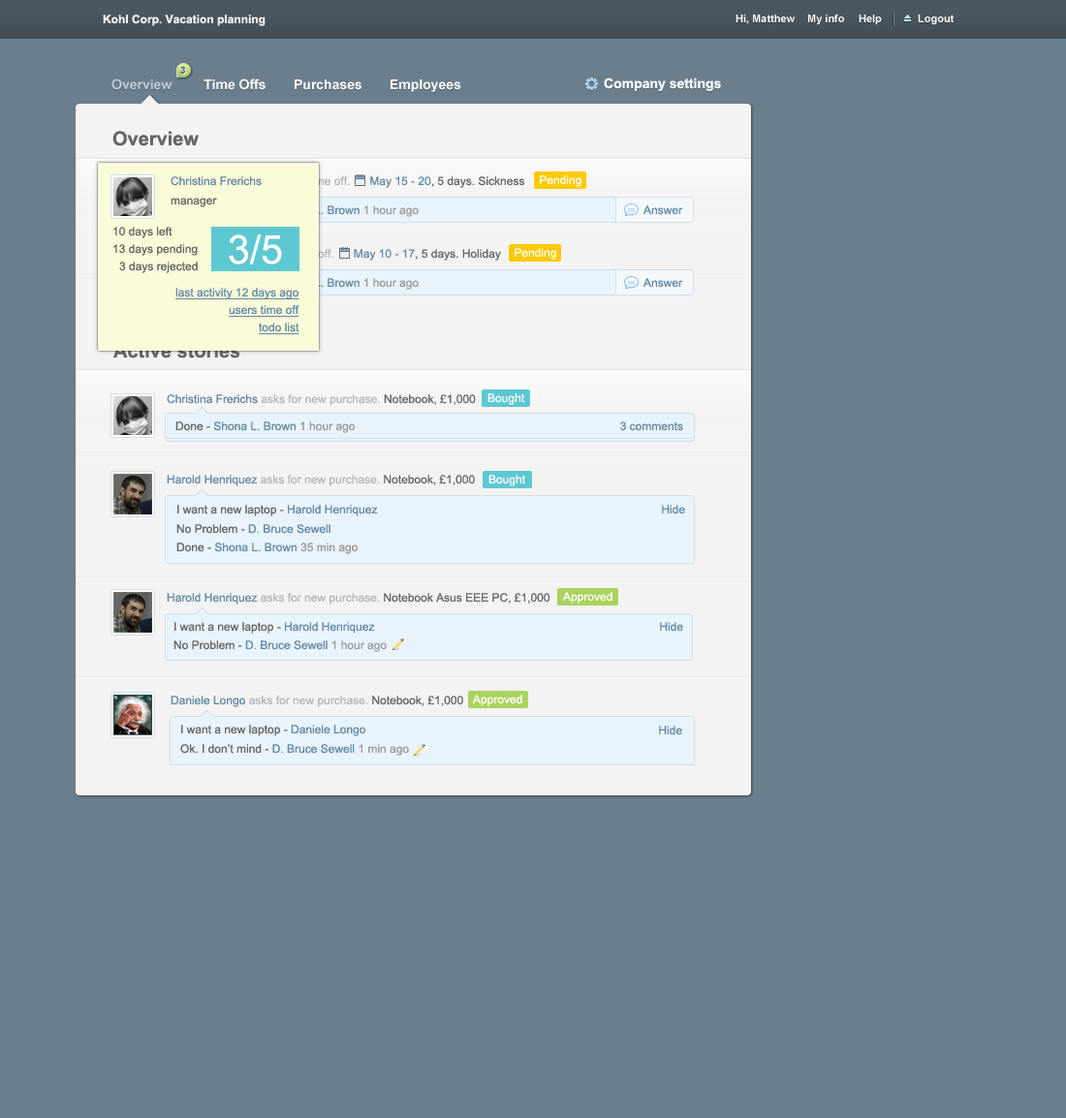
<style>
.page{position:relative;width:1066px;height:1118px;background:#6b7e8d}
.page>*{position:absolute;margin:0}
.t1{font:11.6px "Arial-BoldMT";color:#f3f3f3}
.t2{font:10.7px "Arial-BoldMT";color:#ffffff}
.t3{font:9.7px "Arial-BoldMT";color:#475a6a}
.t4{font:13.6px "Arial-BoldMT";color:#ffffff}
.t5{font:13.6px "Arial-BoldMT";color:#bbcddc}
.t6{font:19.4px "Arial-BoldMT";color:#666666}
.t7{font:11.6px "ArialMT";color:#6689a6}
.t8{font:11.6px "ArialMT";color:#b5b5b5}
.t9{font:11.6px "ArialMT";color:#666666}
.t10{font:11.6px "ArialMT";color:#ffffff}
.t11{font:11.6px "ArialMT"}
.t12{font:39.7px "ArialMT";color:#ffffff}
.t13{font:11.6px "ArialMT";color:#6689a6;text-decoration:underline}
.t14{font:19.4px "Arial-BoldMT"}
.t15{font:11.6px "ArialMT";color:#999999}
</style>
<div class="page">
<p class="t1" style="left:103px;top:15px;width:163px;height:11px">Kohl Corp. Vacation planning</p>
<p class="t2" style="left:736px;top:15px;width:60px;height:9px">Hi, Matthew</p>
<p class="t2" style="left:808px;top:15px;width:36px;height:10px">My info</p>
<p class="t2" style="left:859px;top:15px;width:23px;height:10px">Help</p>
<p class="t2" style="left:918px;top:15px;width:36px;height:10px">Logout</p>
<p class="t3" style="left:180px;top:66px;width:5px;height:8px">3</p>
<p class="t4" style="left:604px;top:78px;width:117px;height:13px">Company settings</p>
<p class="t5" style="left:111px;top:79px;width:62px;height:11px">Overview</p>
<p class="t4" style="left:204px;top:79px;width:62px;height:11px">Time Offs</p>
<p class="t4" style="left:295px;top:79px;width:67px;height:11px">Purchases</p>
<p class="t4" style="left:391px;top:79px;width:70px;height:13px">Employees</p>
<p class="t6" style="left:112px;top:131px;width:87px;height:15px">Overview</p>
<p class="t7" style="left:171px;top:176px;width:353px;height:12px">Christina Frerichs <span class="t8">asks for time off.      </span>May 15 - 20<span class="t9">, 5 days. Sickness</span></p>
<p class="t7" style="left:171px;top:176px;width:91px;height:10px">Christina Frerichs</p>
<p class="t10" style="left:540px;top:175px;width:42px;height:12px"><span class="t9"> </span>Pending</p>
<p class="t9" style="left:171px;top:198px;width:46px;height:9px">manager</p>
<p class="t11" style="left:181px;top:205px;width:238px;height:12px">I need some rest - Shona L. Brown 1 hour ago</p>
<p class="t7" style="left:643px;top:205px;width:40px;height:10px">Answer</p>
<p class="t9" style="left:113px;top:227px;width:60px;height:11px">10 days left</p>
<p class="t9" style="left:113px;top:244px;width:85px;height:12px">13 days pending</p>
<p class="t12" style="left:229px;top:235px;width:53px;height:30px">3/5</p>
<p class="t11" style="left:171px;top:249px;width:330px;height:12px">Daniele Longo asks for time off.      May 10 - 17, 5 days. Holiday</p>
<p class="t10" style="left:515px;top:248px;width:41px;height:12px"><span class="t9"> </span>Pending</p>
<p class="t9" style="left:119px;top:262px;width:79px;height:11px">3 days rejected</p>
<p class="t11" style="left:181px;top:278px;width:238px;height:12px">I need some rest - Shona L. Brown 1 hour ago</p>
<p class="t7" style="left:643px;top:278px;width:40px;height:10px">Answer</p>
<p class="t13" style="left:175px;top:288px;width:124px;height:11px">last activity 12 days ago</p>
<p class="t13" style="left:229px;top:305px;width:70px;height:12px">users time off</p>
<p class="t13" style="left:259px;top:323px;width:40px;height:11px">todo list</p>
<p class="t14" style="left:112px;top:343px;width:128px;height:16px">Active stories</p>
<p class="t8" style="left:167px;top:394px;width:309px;height:12px"><span class="t7">Christina Frerichs </span>asks for new purchase. <span class="t9">Notebook, £1,000</span></p>
<p class="t10" style="left:488px;top:393px;width:36px;height:12px">Bought</p>
<p class="t7" style="left:175px;top:422px;width:181px;height:11px"><span class="t9">Done - </span>Shona L. Brown <span class="t15">1 hour ago</span></p>
<p class="t7" style="left:620px;top:422px;width:63px;height:9px">3 comments</p>
<p class="t8" style="left:167px;top:475px;width:308px;height:12px"><span class="t7">Harold Henriquez </span>asks for new purchase. <span class="t9">Notebook, £1,000</span></p>
<p class="t10" style="left:488px;top:475px;width:37px;height:12px">Bought</p>
<p class="t9" style="left:177px;top:505px;width:201px;height:12px">I want a new laptop - <span class="t7">Harold Henriquez</span></p>
<p class="t7" style="left:662px;top:505px;width:23px;height:10px">Hide</p>
<p class="t7" style="left:176px;top:524px;width:155px;height:10px"><span class="t9">No Problem - </span>D. Bruce Sewell</p>
<p class="t7" style="left:176px;top:543px;width:183px;height:11px"><span class="t9">Done - </span>Shona L. Brown <span class="t15">35 min ago</span></p>
<p class="t9" style="left:167px;top:593px;width:383px;height:12px"><span class="t7">Harold Henriquez </span><span class="t8">asks for new purchase. </span>Notebook Asus EEE PC, £1,000</p>
<p class="t10" style="left:562px;top:592px;width:51px;height:12px">Approved</p>
<p class="t9" style="left:174px;top:622px;width:201px;height:12px">I want a new laptop - <span class="t7">Harold Henriquez</span></p>
<p class="t7" style="left:660px;top:622px;width:23px;height:10px">Hide</p>
<p class="t7" style="left:173px;top:641px;width:214px;height:11px"><span class="t9">No Problem - </span>D. Bruce Sewell <span class="t15">1 hour ago</span></p>
<p class="t8" style="left:171px;top:696px;width:292px;height:12px"><span class="t7">Daniele Longo </span>asks for new purchase. <span class="t9">Notebook, £1,000</span></p>
<p class="t10" style="left:472px;top:695px;width:50px;height:12px">Approved</p>
<p class="t9" style="left:181px;top:725px;width:185px;height:12px">I want a new laptop - <span class="t7">Daniele Longo</span></p>
<p class="t7" style="left:659px;top:726px;width:23px;height:10px">Hide</p>
<p class="t9" style="left:180px;top:744px;width:229px;height:12px">Ok. I don’t mind - <span class="t7">D. Bruce Sewell </span><span class="t15">1 min ago</span></p>
</div>
